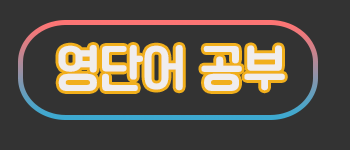
<style>
.page{position:relative;width:350px;height:150px;background:#333333}
.page>*{position:absolute;margin:0}
.t1{font:48px "TTChungchunsidaeR";color:#f0eded}
.t2{font:48px "TTChungchunsidaeR";color:#000000}
</style>
<div class="page">
<p class="t1" style="left:58px;top:45px;width:227px;height:46px"><span class="t2"> </span>영단어 공부</p>
</div>
